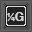
<style>
.page{position:relative;width:32px;height:32px;background:#212121}
.page>*{position:absolute;margin:0}
.t1{font:12px "Calibri";color:#dadada}
.t2{font:12px "Helvetica-Bold";color:#dadada}
</style>
<div class="page">
<p class="t1" style="left:7px;top:12px;width:17px;height:9px">1/4<span class="t2">G</span></p>
</div>
